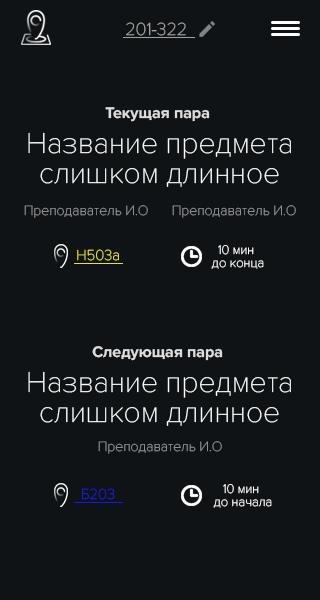
<style>
.page{position:relative;width:320px;height:600px;background:#101316}
.page>*{position:absolute;margin:0}
.t1{font:18px "ProximaNovaT-Thin";color:#a1a1a1}
.t2{font:16px "ProximaNova-Bold";color:#dddddd}
.t3{font:30px/30px "ProximaNovaT-Thin";color:#ffffff}
.t4{font:14px "ProximaNovaT-Thin";color:#8d8e8f}
.t5{font:13px "ProximaNovaT-Thin";color:#ffffff}
.t6{font:15px "ProximaNovaT-Thin";color:#e7e51d}
.t7{font:15px "ProximaNovaT-Thin";color:#161be1}
</style>
<div class="page">
<p class="t1" style="left:126px;top:22px;width:60px;height:14px">201-322</p>
<p class="t2" style="left:105px;top:107px;width:105px;height:15px">Текущая пара</p>
<p class="t3" style="left:28px;top:132px;width:263px;height:55px;text-align:center">Название предмета<br>слишком длинное</p>
<p class="t4" style="left:24px;top:205px;width:124px;height:13px">Преподаватель И.О</p>
<p class="t4" style="left:172px;top:205px;width:124px;height:13px">Преподаватель И.О</p>
<p class="t5" style="left:218px;top:245px;width:36px;height:10px">10 мин</p>
<p class="t6" style="left:77px;top:249px;width:42px;height:12px">Н503а</p>
<p class="t5" style="left:211px;top:260px;width:53px;height:9px">до конца</p>
<p class="t2" style="left:92px;top:346px;width:131px;height:15px">Следующая пара</p>
<p class="t3" style="left:28px;top:371px;width:263px;height:55px;text-align:center">Название предмета<br>слишком длинное</p>
<p class="t4" style="left:98px;top:441px;width:124px;height:13px">Преподаватель И.О</p>
<p class="t5" style="left:223px;top:484px;width:36px;height:10px">10 мин</p>
<p class="t7" style="left:82px;top:488px;width:33px;height:12px">Б203</p>
<p class="t5" style="left:213px;top:499px;width:59px;height:9px">до начала</p>
</div>
